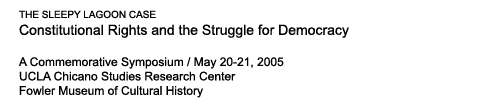
<style>
.page{position:relative;width:500px;height:100px;background:#ffffff}
.page>*{position:absolute;margin:0}
.t1{font:12px "ArialMT";color:#000000}
.t2{font:10px "ArialMT";color:#000000}
.t3{font:14px "ArialMT";color:#000000}
</style>
<div class="page">
<p class="t1" style="left:18px;top:10px;width:331px;height:88px"><span class="t2">THE SLEEPY LAGOON CASE<br></span><span class="t3">Constitutional Rights and the Struggle for Democracy<br><br></span>A Commemorative Symposium / May 20-21, 2005<br>UCLA Chicano Studies Research Center <br>Fowler Museum of Cultural History</p>
</div>
